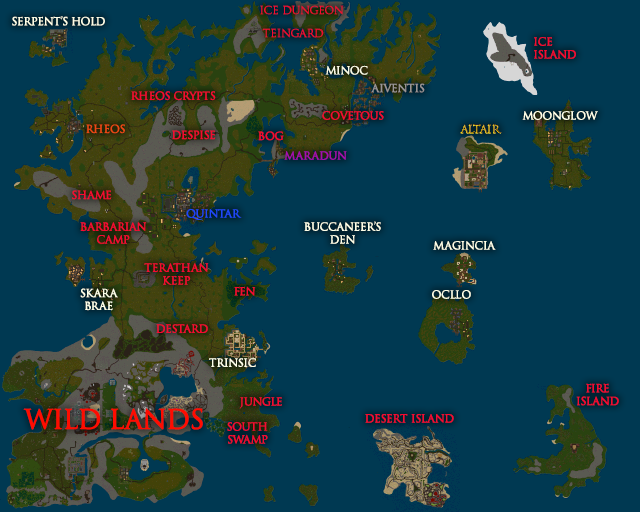
<style>
.page{position:relative;width:640px;height:512px;background:#003952}
.page>*{position:absolute;margin:0}
.t1{font:10.7px "TrajanColor-Concept";letter-spacing:-0.05em;color:#f70a31;font-weight:bold}
.t2{font:10.7px "TrajanColor-Concept";letter-spacing:-0.05em;color:#feffe8;font-weight:bold}
.t3{font:10.7px "TrajanColor-Concept";letter-spacing:-0.05em;color:#999595;font-weight:bold}
.t4{font:10.7px "TrajanColor-Concept";letter-spacing:-0.05em;color:#ee4815;font-weight:bold}
.t5{font:10.7px "TrajanColor-Concept";letter-spacing:-0.05em;font-weight:bold}
.t6{font:10.7px "TrajanColor-Concept";letter-spacing:-0.05em;color:#a60db0;font-weight:bold}
.t7{font:10.7px "TrajanColor-Concept";letter-spacing:-0.05em;color:#1f48fb;font-weight:bold}
.t8{font:10.7px "TrajanColor-Concept";letter-spacing:-0.05em;color:#1d47fa;font-weight:bold}
.t9{font:26px "TrajanColor-Concept";letter-spacing:-0.05em;color:#ff0c00;font-weight:bold}
</style>
<div class="page">
<p class="t1" style="left:260px;top:5px;width:84px;height:10px">ICE DUNGEON</p>
<p class="t2" style="left:12px;top:16px;width:93px;height:10px">SERPENT’S HOLD</p>
<p class="t1" style="left:262px;top:28px;width:62px;height:10px">TEINGARD</p>
<p class="t1" style="left:534px;top:37px;width:42px;height:22px">ICE<br>ISLAND</p>
<p class="t2" style="left:325px;top:65px;width:43px;height:10px;opacity:0.97">MINOC</p>
<p class="t3" style="left:371px;top:83px;width:54px;height:10px">AIVENTIS</p>
<p class="t1" style="left:131px;top:91px;width:85px;height:10px">RHEOS CRYPTS</p>
<p class="t1" style="left:322px;top:111px;width:62px;height:9px">COVETOUS</p>
<p class="t2" style="left:522px;top:111px;width:76px;height:9px">MOONGLOW</p>
<p class="t4" style="left:86px;top:124px;width:39px;height:10px">RHEOS</p>
<p class="t5" style="left:460px;top:124px;width:42px;height:10px">ALTAIR</p>
<p class="t1" style="left:172px;top:130px;width:44px;height:10px">DESPISE</p>
<p class="t1" style="left:258px;top:131px;width:26px;height:10px">BOG</p>
<p class="t6" style="left:284px;top:151px;width:63px;height:9px">MARADUN</p>
<p class="t1" style="left:72px;top:190px;width:40px;height:10px">SHAME</p>
<p class="t7" style="left:186px;top:209px;width:56px;height:11px"><span class="t8">Q</span>UINTAR</p>
<p class="t1" style="left:80px;top:222px;width:67px;height:22px;text-align:center">BARBARIAN<br>CAMP</p>
<p class="t2" style="left:304px;top:221px;width:77px;height:23px;text-align:center">BUCCANEER’S<br>DEN</p>
<p class="t2" style="left:433px;top:241px;width:63px;height:9px">MAGINCIA</p>
<p class="t1" style="left:144px;top:263px;width:65px;height:22px;text-align:center">TERATHAN<br>KEEP</p>
<p class="t2" style="left:80px;top:288px;width:38px;height:23px;text-align:center">SKARA<br>BRAE</p>
<p class="t1" style="left:234px;top:286px;width:22px;height:10px">FEN</p>
<p class="t2" style="left:432px;top:290px;width:39px;height:9px">OCLLO</p>
<p class="t1" style="left:156px;top:324px;width:52px;height:9px">DESTARD</p>
<p class="t2" style="left:209px;top:358px;width:47px;height:9px">TRINSIC</p>
<p class="t1" style="left:576px;top:383px;width:43px;height:23px;text-align:center">FIRE<br>ISLAND</p>
<p class="t1" style="left:239px;top:397px;width:43px;height:12px">JUNGLE</p>
<p class="t9" style="left:23px;top:408px;width:180px;height:22px">WILD LANDS</p>
<p class="t1" style="left:365px;top:414px;width:89px;height:9px">DESERT ISLAND</p>
<p class="t1" style="left:227px;top:422px;width:41px;height:22px;text-align:center">SOUTH <br>SWAMP</p>
</div>
